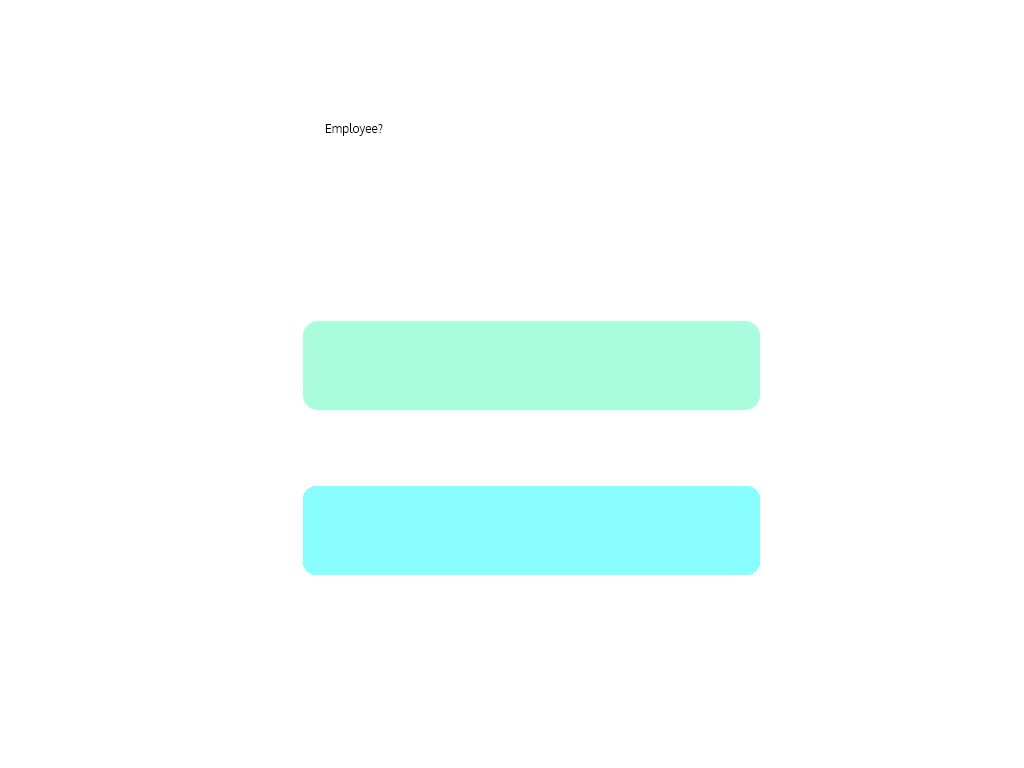
<style>
.page{position:relative;width:1024px;height:768px;background:#ffffff}
.page>*{position:absolute;margin:0}
.t1{font:12px "Oxygen-Light";color:#000000}
</style>
<div class="page">
<p class="t1" style="left:325px;top:123px;width:58px;height:13px">Employee?</p>
</div>
